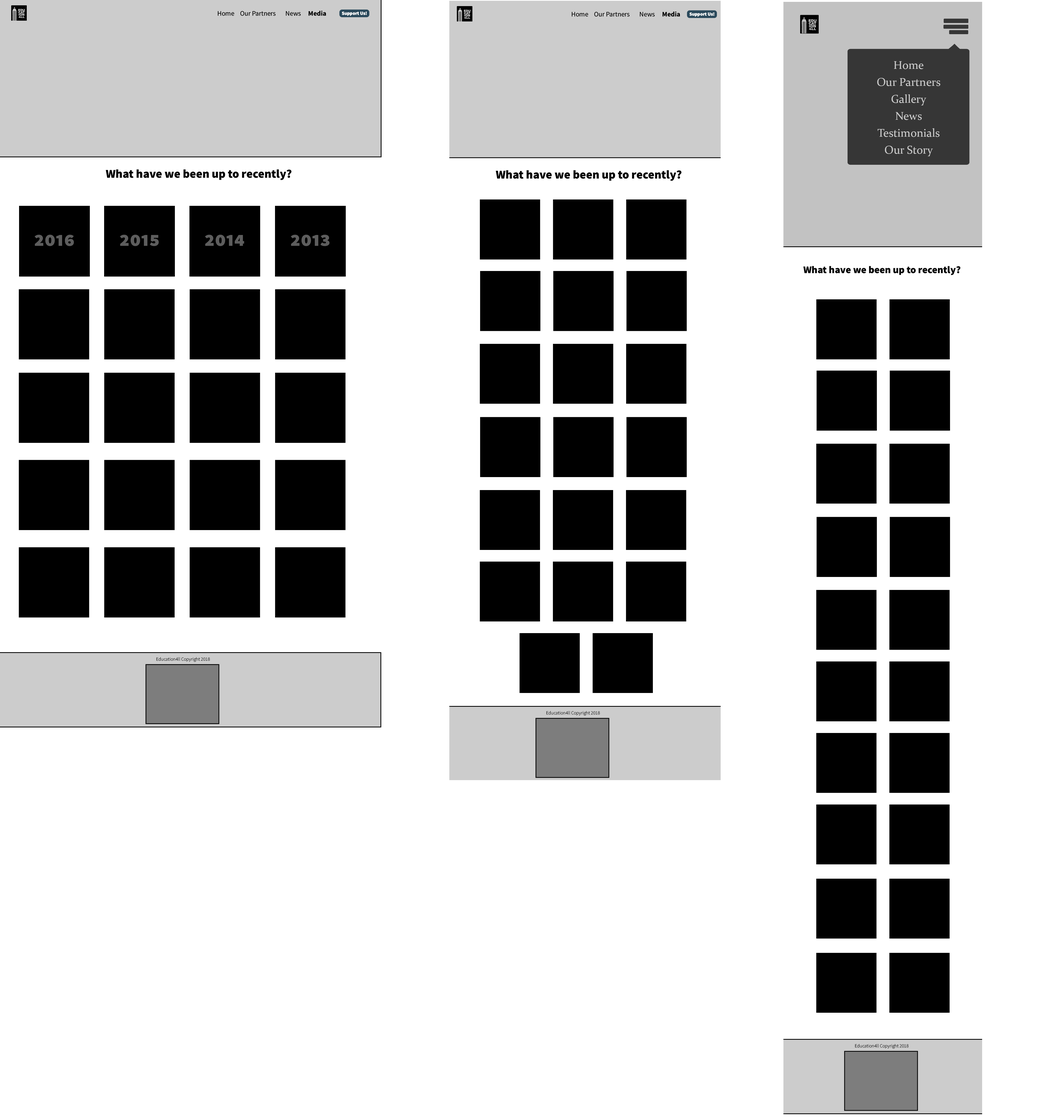
<style>
.page{position:relative;width:1064px;height:1120px;background:#ffffff}
.page>*{position:absolute;margin:0}
.t1{font:6.8px "SourceSansRoman-Regular";color:#000000}
.t2{font:6.8px "SourceSansRoman-Bold";color:#000000}
.t3{font:4.7px "SourceSansRoman-Black";color:#ffffff}
.t4{font:11.4px/17px "Constantia";color:#cbcbcb}
.t5{font:12px "SourceSansRoman-Black";color:#000000}
.t6{font:20.4px "SourceSansRoman-Black";color:#5d5d5d;font-variant:small-caps}
.t7{font:20.4px "SourceSansRoman-Black";color:#000000;font-variant:small-caps}
.t8{font:10.1px "SourceSansRoman-Black";color:#000000}
.t9{font:4.7px "SourceSansRoman-Light";color:#000000}
</style>
<div class="page">
<p class="t1" style="left:218px;top:11px;width:108px;height:5px">Home Our Partners  News  <span class="t2">Media</span></p>
<p class="t3" style="left:342px;top:11px;width:25px;height:5px">Support Us!</p>
<p class="t1" style="left:572px;top:11px;width:108px;height:6px">Home Our Partners  News  <span class="t2">Media</span></p>
<p class="t3" style="left:690px;top:12px;width:25px;height:5px">Support Us!</p>
<p class="t4" style="left:877px;top:61px;width:63px;height:95px;text-align:center">Home<br>Our Partners<br>Gallery<br>News<br>Testimonials<br>Our Story</p>
<p class="t5" style="left:106px;top:169px;width:186px;height:11px">What have we been up to recently?</p>
<p class="t5" style="left:496px;top:170px;width:186px;height:11px">What have we been up to recently?</p>
<p class="t6" style="left:34px;top:235px;width:40px;height:11px"><span class="t7"><br></span>2016</p>
<p class="t6" style="left:120px;top:235px;width:39px;height:11px"><span class="t7"><br></span>2015</p>
<p class="t6" style="left:205px;top:235px;width:39px;height:11px"><span class="t7"><br></span>2014</p>
<p class="t6" style="left:291px;top:235px;width:39px;height:11px"><span class="t7"><br></span>2013</p>
<p class="t8" style="left:803px;top:266px;width:158px;height:9px">What have we been up to recently?</p>
<p class="t9" style="left:156px;top:657px;width:54px;height:5px">Education4ll Copyright 2018</p>
<p class="t9" style="left:546px;top:711px;width:54px;height:5px">Education4ll Copyright 2018</p>
<p class="t9" style="left:855px;top:1044px;width:54px;height:5px">Education4ll Copyright 2018</p>
</div>
